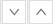
<style>
.page{position:relative;width:53px;height:24px;background:#ffffff}
.page>*{position:absolute;margin:0}
.t1{font:16px "DidactGothic";color:#6d6c67;scale:1.03 1}
.t2{font:16.3px "DidactGothic";color:#6d6c67}
</style>
<div class="page">
<p class="t1" style="left:9px;top:8px;width:11px;height:8px;rotate:90deg">&gt;</p>
<p class="t2" style="left:36px;top:8px;width:10px;height:8px;rotate:-90deg">&gt;</p>
</div>
